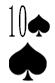
<style>
.page{position:relative;width:55px;height:83px;background:#ffffff}
.page>*{position:absolute;margin:0}
.t1{font:42px "DFKaiShu-SB-Estd-BF";color:#000000;scale:0.5 1}
</style>
<div class="page">
<p class="t1" style="left:9px;top:5px;width:18px;height:33px">10</p>
</div>
